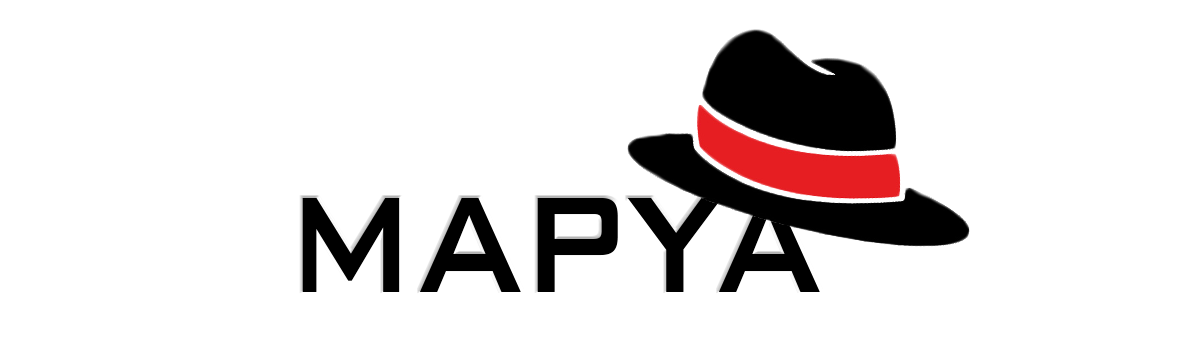
<style>
.page{position:relative;width:1200px;height:343px;background:#ffffff}
.page>*{position:absolute;margin:0}
.t1{font:222.2px "BankGothicBT-Medium";color:#000000;scale:0.75 1}
</style>
<div class="page">
<p class="t1" style="left:302px;top:198px;width:518px;height:94px">mapya</p>
</div>
